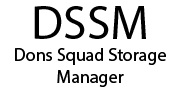
<style>
.page{position:relative;width:180px;height:90px;background:#ffffff}
.page>*{position:absolute;margin:0}
.t1{font:18px "MyriadHebrew-Regular";color:#000000}
.t2{font:48px "MyriadHebrew-Regular";color:#000000}
</style>
<div class="page">
<p class="t1" style="left:15px;top:6px;width:151px;height:81px;text-align:center"><span class="t2">DSSM<br></span>Dons Squad Storage<br>Manager</p>
</div>
